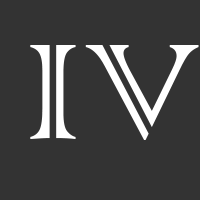
<style>
.page{position:relative;width:200px;height:200px;background:#333333}
.page>*{position:absolute;margin:0}
.t1{font:179.7px "ColonnaMT";color:#ffffff}
</style>
<div class="page">
<p class="t1" style="left:30px;top:45px;width:169px;height:95px">IV</p>
</div>
